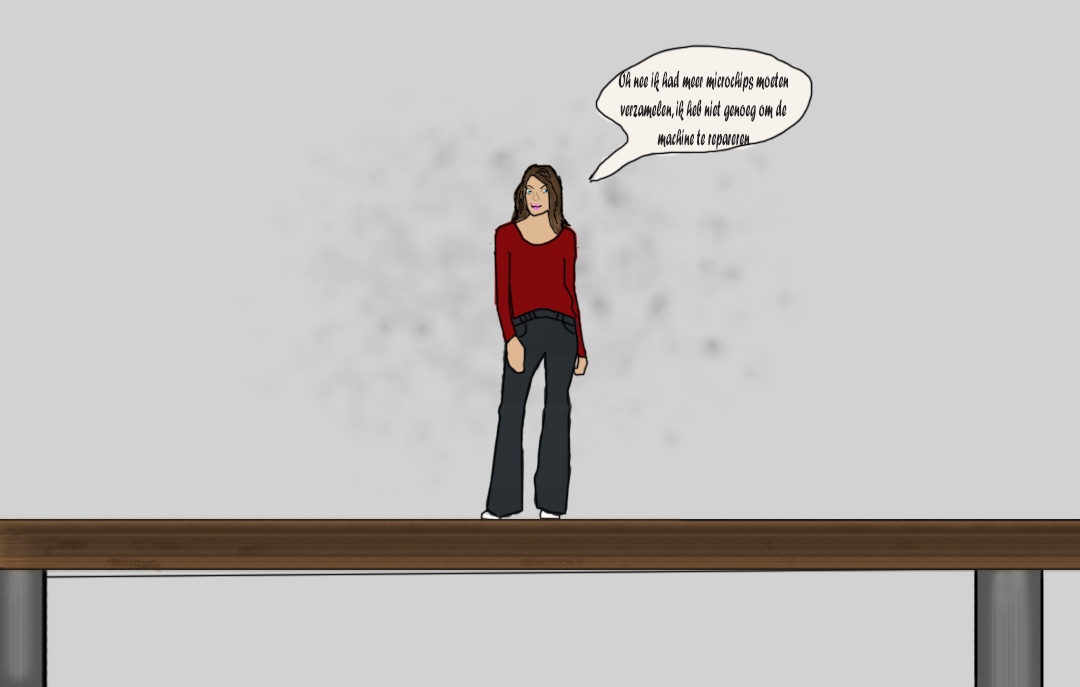
<style>
.page{position:relative;width:1080px;height:687px;background:#d2d2d2}
.page>*{position:absolute;margin:0}
.t1{font:24px "ForteMT";color:#282829;scale:0.45 1}
</style>
<div class="page">
<p class="t1" style="left:618px;top:70px;width:171px;height:80px;text-align:center">Oh nee ik had meer microchips moeten verzamelen, ik heb niet genoeg om de machine te repareren</p>
</div>
